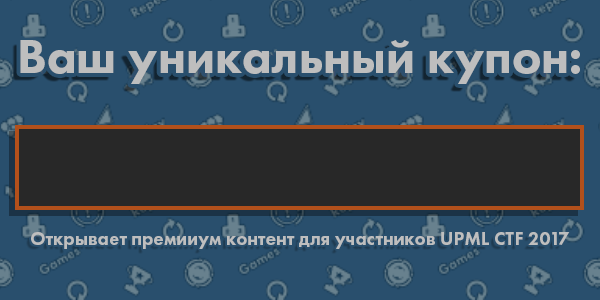
<style>
.page{position:relative;width:600px;height:300px;background:#294f6d}
.page>*{position:absolute;margin:0}
.t1{font:49.9px "FuturaPT-Heavy";color:#bebebe}
.t2{font:19px "FuturaPT-Heavy";color:#bebebe}
</style>
<div class="page">
<p class="t1" style="left:20px;top:40px;width:560px;height:44px">Ваш уникальный купон:</p>
<p class="t2" style="left:31px;top:232px;width:539px;height:17px">Открывает премииум контент для участников UPML CTF 2017 Summer</p>
</div>
